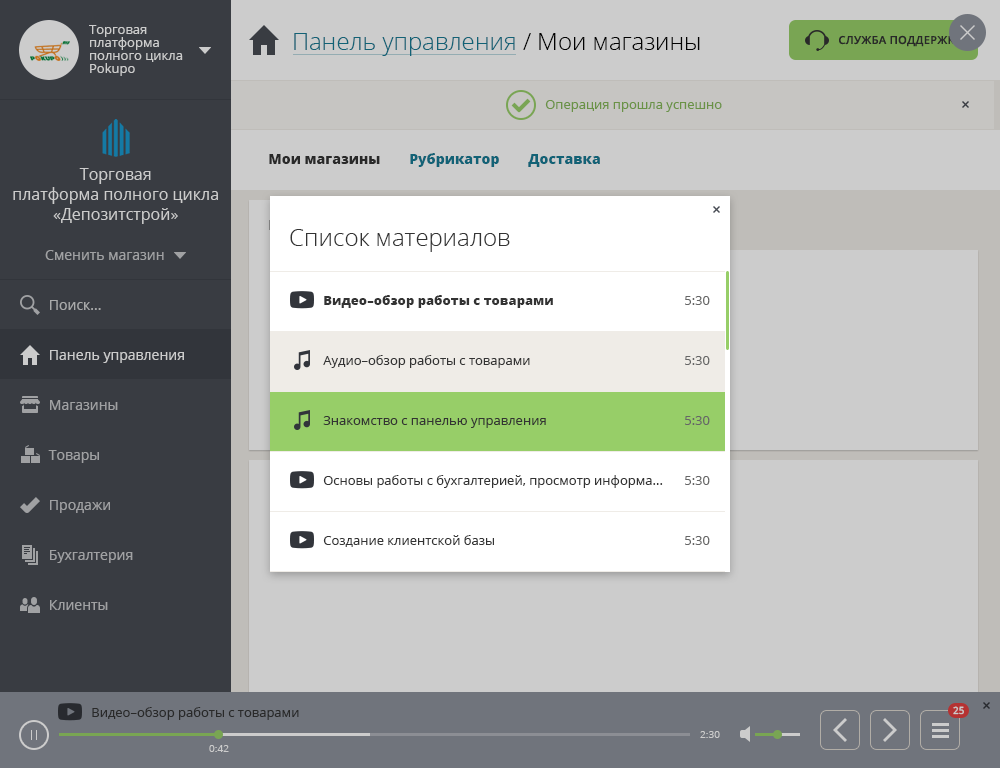
<style>
.page{position:relative;width:1000px;height:768px;background:#cccccc}
.page>*{position:absolute;margin:0}
.t1{font:13px/13px "OpenSans";color:#cccccc}
.t2{font:24px "OpenSans-Light"}
.t3{font:11px "OpenSans-Semibold";letter-spacing:0.025em;color:#333333;text-transform:uppercase}
.t4{font:13px "OpenSans";color:#6a9246}
.t5{font:14px "OpenSans-Extrabold";color:#333333}
.t6{font:14px "OpenSans-Extrabold";color:#126276}
.t7{font:16px/20px "OpenSans";color:#cccccc}
.t8{font:24px "OpenSans-Light";color:#333333}
.t9{font:14px "OpenSans";color:#a0a1a3}
.t10{font:14px "OpenSans";color:#a9aaaa}
.t11{font:13px "OpenSans-Extrabold";color:#333333}
.t12{font:13px "OpenSans";color:#666666}
.t13{font:14px "OpenSans";color:#cccccc}
.t14{font:13px "OpenSans";color:#333333}
.t15{font:10px "OpenSans-Semibold";letter-spacing:0.025em;color:#cccccc}
.t16{font:10px "OpenSans";color:#cccccc}
</style>
<div class="page">
<p class="t1" style="left:89px;top:25px;width:94px;height:51px">Торговая <br>платформа <br>полного цикла <br>Pokupo</p>
<p class="t2" style="left:294px;top:33px;width:406px;height:23px">Панель управления / Мои магазины</p>
<p class="t3" style="left:839px;top:35px;width:124px;height:12px">Служба поддержки</p>
<p class="t4" style="left:545px;top:100px;width:177px;height:12px">Операция прошла успешно</p>
<p class="t5" style="left:269px;top:154px;width:111px;height:10px">Мои магазины</p>
<p class="t6" style="left:410px;top:153px;width:89px;height:14px">Рубрикатор</p>
<p class="t6" style="left:528px;top:154px;width:72px;height:13px">Доставка</p>
<p class="t7" style="left:13px;top:168px;width:205px;height:56px;text-align:center">Торговая<br>платформа полного цикла<br>«Депозитстрой»</p>
<p class="t8" style="left:290px;top:229px;width:220px;height:23px">Список материалов</p>
<p class="t9" style="left:45px;top:250px;width:119px;height:10px">Сменить магазин</p>
<p class="t10" style="left:50px;top:300px;width:51px;height:10px">Поиск...</p>
<p class="t11" style="left:324px;top:295px;width:229px;height:13px">Видео–обзор работы с товарами</p>
<p class="t12" style="left:685px;top:296px;width:25px;height:9px">5:30</p>
<p class="t13" style="left:50px;top:350px;width:134px;height:13px">Панель управления</p>
<p class="t14" style="left:323px;top:355px;width:207px;height:13px">Аудио–обзор работы с товарами</p>
<p class="t12" style="left:685px;top:356px;width:25px;height:9px">5:30</p>
<p class="t9" style="left:50px;top:400px;width:68px;height:10px">Магазины</p>
<p class="t14" style="left:323px;top:416px;width:223px;height:12px">Знакомство с панелью управления</p>
<p class="t12" style="left:685px;top:416px;width:25px;height:9px">5:30</p>
<p class="t9" style="left:48px;top:450px;width:51px;height:13px">Товары</p>
<p class="t14" style="left:323px;top:475px;width:340px;height:13px">Основы работы с бухгалтерией, просмотр информа...</p>
<p class="t12" style="left:685px;top:476px;width:25px;height:9px">5:30</p>
<p class="t9" style="left:50px;top:500px;width:60px;height:13px">Продажи</p>
<p class="t14" style="left:323px;top:535px;width:171px;height:12px">Создание клиентской базы</p>
<p class="t12" style="left:685px;top:536px;width:25px;height:9px">5:30</p>
<p class="t9" style="left:50px;top:550px;width:83px;height:13px">Бухгалтерия</p>
<p class="t9" style="left:50px;top:600px;width:58px;height:10px">Клиенты</p>
<p class="t14" style="left:92px;top:707px;width:207px;height:13px">Видео–обзор работы с товарами</p>
<p class="t15" style="left:953px;top:706px;width:11px;height:9px">25</p>
<p class="t16" style="left:700px;top:731px;width:20px;height:7px">2:30</p>
<p class="t16" style="left:209px;top:745px;width:20px;height:7px">0:42</p>
</div>
